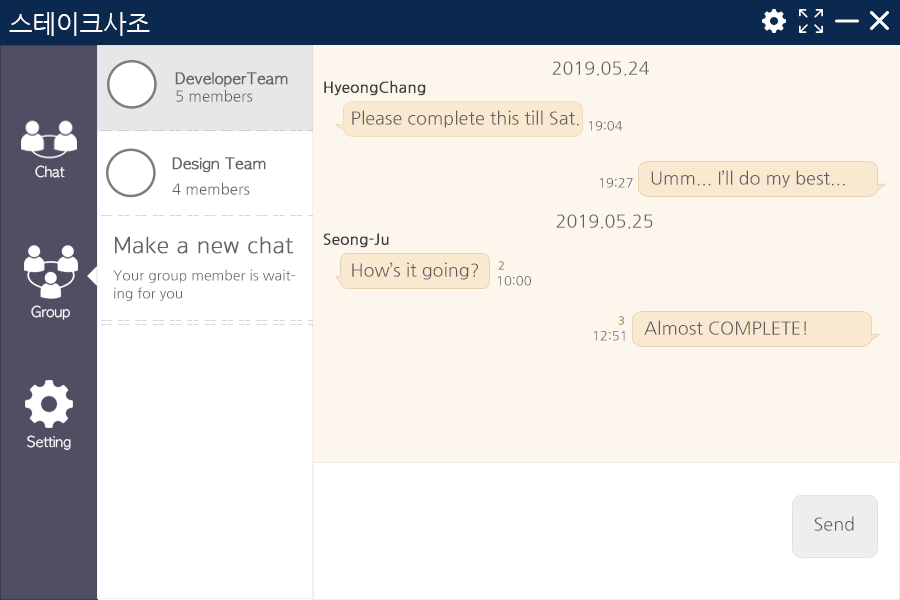
<style>
.page{position:relative;width:900px;height:600px;background:#fdf6ed}
.page>*{position:absolute;margin:0}
.t1{font:25px "NanumGothic";color:#fcfafa}
.t2{font:18px "NanumGothic";color:#5f5f5f}
.t3{font:15px/18px "AppleGothic";color:#656565;font-weight:bold}
.t4{font:15px/8px "NanumGothic";color:#656565}
.t5{font:15px "NanumGothic";color:#3e3e3e;font-weight:bold}
.t6{font:13px "NanumGothic";color:#5f5f5f}
.t7{font:15px/14px "NanumGothic";color:#656565}
.t8{font:14px "AppleGothic";color:#fcfafa}
.t9{font:14px/18px "NanumGothic";color:#656565}
.t10{font:24px/18px "SukhumvitSet-Thin";color:#656565;font-weight:bold}
.t11{font:11px "NanumGothic";color:#a7824d;font-weight:bold}
.t12{font:13px "NanumGothic"}
</style>
<div class="page">
<p class="t1" style="left:9px;top:12px;width:141px;height:24px">스테이크사조</p>
<p class="t2" style="left:552px;top:61px;width:97px;height:15px">2019.05.24</p>
<p class="t3" style="left:175px;top:72px;width:113px;height:30px">DeveloperTeam<br><span class="t4">5 members</span></p>
<p class="t5" style="left:324px;top:80px;width:102px;height:16px">HyeongChang</p>
<p class="t2" style="left:352px;top:110px;width:227px;height:18px">Please complete this till Sat.</p>
<p class="t6" style="left:588px;top:121px;width:35px;height:10px">19:04</p>
<p class="t3" style="left:172px;top:157px;width:94px;height:38px">Design Team<br><br><span class="t7">4 members</span></p>
<p class="t8" style="left:35px;top:165px;width:30px;height:13px">Chat</p>
<p class="t2" style="left:651px;top:170px;width:194px;height:18px">Umm... I’ll do my best...</p>
<p class="t6" style="left:599px;top:178px;width:34px;height:10px">19:27</p>
<p class="t2" style="left:556px;top:214px;width:97px;height:15px">2019.05.25</p>
<p class="t5" style="left:323px;top:233px;width:66px;height:15px">Seong-Ju</p>
<p class="t9" style="left:113px;top:236px;width:182px;height:65px"><span class="t10">Make a new chat<br><br></span>Your group member is wait-<br>ing for you</p>
<p class="t2" style="left:352px;top:262px;width:126px;height:18px">How’s it going?</p>
<p class="t11" style="left:498px;top:261px;width:6px;height:9px">2</p>
<p class="t6" style="left:497px;top:276px;width:34px;height:10px">10:00</p>
<p class="t8" style="left:31px;top:305px;width:39px;height:15px">Group</p>
<p class="t11" style="left:618px;top:316px;width:6px;height:9px">3</p>
<p class="t2" style="left:644px;top:320px;width:162px;height:15px">Almost COMPLETE!</p>
<p class="t12" style="left:593px;top:331px;width:32px;height:10px">12:51</p>
<p class="t8" style="left:27px;top:435px;width:44px;height:15px">Setting</p>
<p class="t2" style="left:814px;top:516px;width:40px;height:15px">Send</p>
<p class="t2" style="left:814px;top:516px;width:40px;height:15px">Send</p>
</div>
